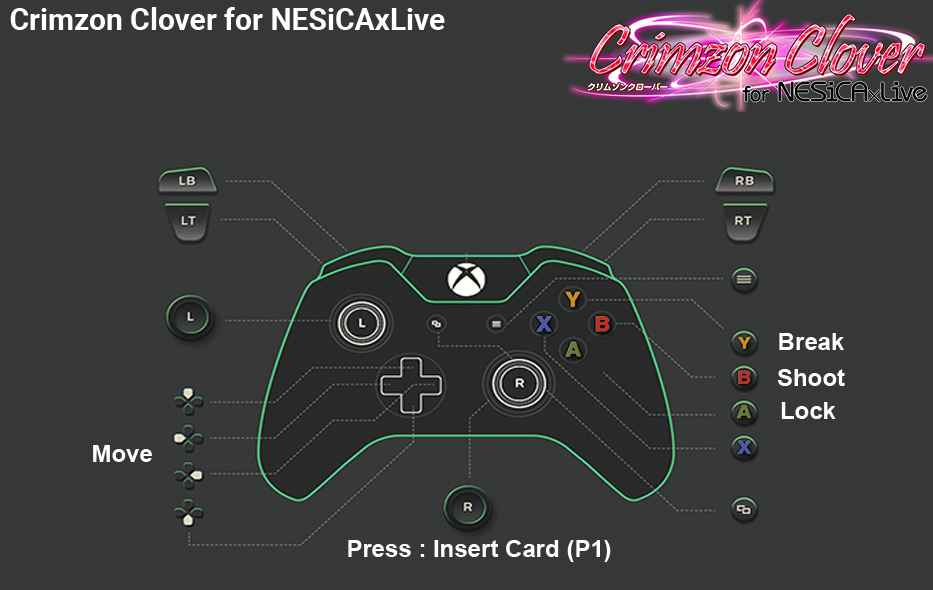
<style>
.page{position:relative;width:933px;height:590px;background:#363838}
.page>*{position:absolute;margin:0}
.t1{font:30px "Roboto-Bold";color:#ffffff}
.t2{font:24px "Arial-BoldMT";color:#fefefe}
</style>
<div class="page">
<p class="t1" style="left:10px;top:7px;width:435px;height:23px">Crimzon Clover for NESiCAxLive</p>
<p class="t2" style="left:779px;top:333px;width:65px;height:17px">Break</p>
<p class="t2" style="left:777px;top:369px;width:68px;height:17px">Shoot</p>
<p class="t2" style="left:781px;top:402px;width:55px;height:17px">Lock</p>
<p class="t2" style="left:93px;top:445px;width:59px;height:17px">Move</p>
<p class="t2" style="left:348px;top:540px;width:263px;height:22px">Press : Insert Card (P1)</p>
</div>
